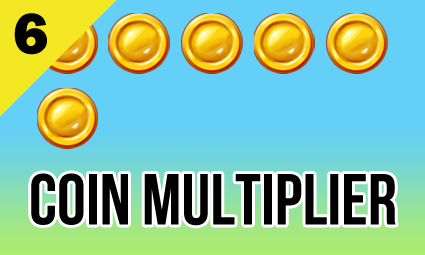
<style>
.page{position:relative;width:425px;height:255px;background:#64cff7}
.page>*{position:absolute;margin:0}
.t1{font:60px "FranklinGothic-Heavy";color:#000000}
.t2{font:72px "BebasNeueBold";color:#000000}
</style>
<div class="page">
<p class="t1" style="left:14px;top:13px;width:33px;height:42px">6</p>
<p class="t2" style="left:31px;top:173px;width:365px;height:53px">COIN MULTIPLIER</p>
</div>
